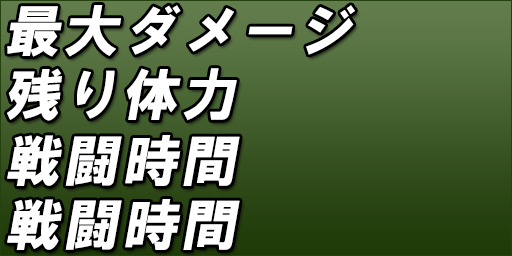
<style>
.page{position:relative;width:512px;height:256px}
.page>*{position:absolute;margin:0}
.t1{font:56px "HGSoeiKakugothicUB";letter-spacing:0.05em;color:#ffffff;font-style:italic}
</style>
<div class="page">
<p class="t1" style="left:7px;top:5px;width:348px;height:52px">最大ダメージ</p>
<p class="t1" style="left:7px;top:68px;width:230px;height:53px">残り体力</p>
<p class="t1" style="left:7px;top:135px;width:233px;height:51px">戦闘時間</p>
<p class="t1" style="left:7px;top:199px;width:233px;height:51px">戦闘時間</p>
</div>
